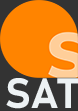
<style>
.page{position:relative;width:78px;height:111px;background:#ff8400}
.page>*{position:absolute;margin:0}
.t1{font:42px "Bahnschrift-Bold";color:#edf2f4}
</style>
<div class="page">
<p class="t1" style="left:6px;top:78px;width:73px;height:31px">SAT</p>
</div>
